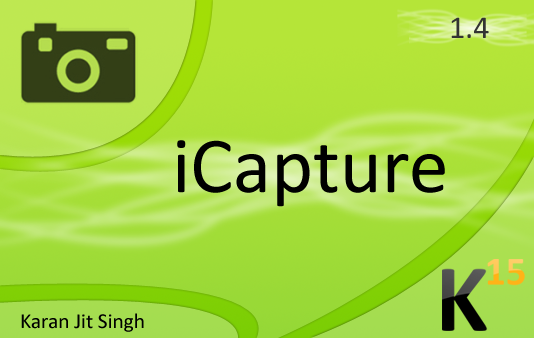
<style>
.page{position:relative;width:534px;height:338px}
.page>*{position:absolute;margin:0}
.t1{font:32px "Calibri";color:#333333}
.t2{font:80px "Calibri";color:#000000}
.t3{font:21.3px "Calibri";color:#000000}
</style>
<div class="page">
<p class="t1" style="left:451px;top:17px;width:38px;height:21px">1.4</p>
<p class="t2" style="left:177px;top:140px;width:268px;height:67px">iCapture</p>
<p class="t3" style="left:21px;top:313px;width:123px;height:19px">Karan Jit Singh</p>
</div>
